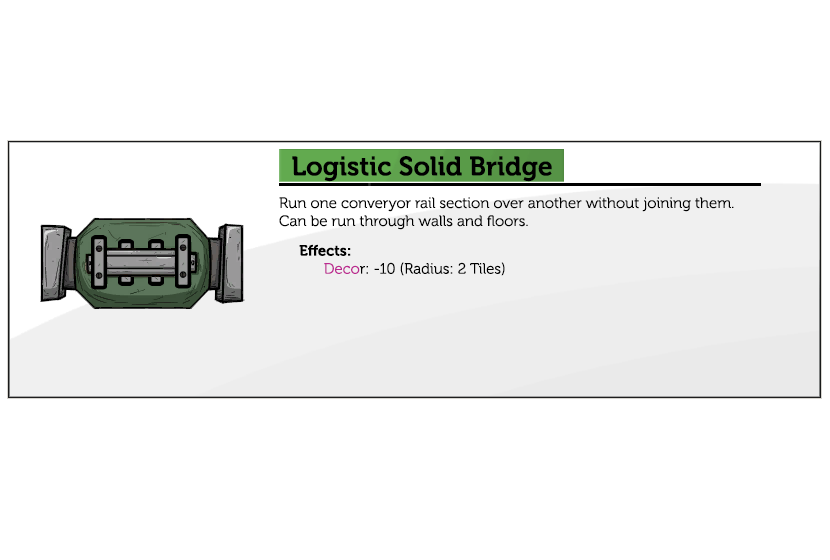
<style>
.page{position:relative;width:830px;height:560px;background:#ffffff}
.page>*{position:absolute;margin:0}
.t1{font:26.7px "Museo-700";color:#000000}
.t2{font:15px "Museo-300";color:#000000}
.t3{font:15px "Museo-700";color:#000000}
.t4{font:15px "Museo-300";color:#bc2991}
</style>
<div class="page">
<p class="t1" style="left:292px;top:156px;width:260px;height:26px">Logistic Solid Bridge</p>
<p class="t2" style="left:279px;top:197px;width:455px;height:33px">Run one converyor rail section over another without joining them.<br>Can be run through walls and floors.</p>
<p class="t2" style="left:299px;top:244px;width:206px;height:32px"><span class="t3">Effects:<br>      </span><span class="t4">Deco</span>r: -10 (Radius: 2 Tiles)</p>
</div>
